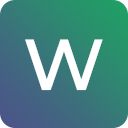
<style>
.page{position:relative;width:128px;height:128px}
.page>*{position:absolute;margin:0}
.t1{font:72px "Montserrat-SemiBold";letter-spacing:0.2em;color:#ffffff}
</style>
<div class="page">
<p class="t1" style="left:25px;top:39px;width:78px;height:52px">W</p>
</div>
